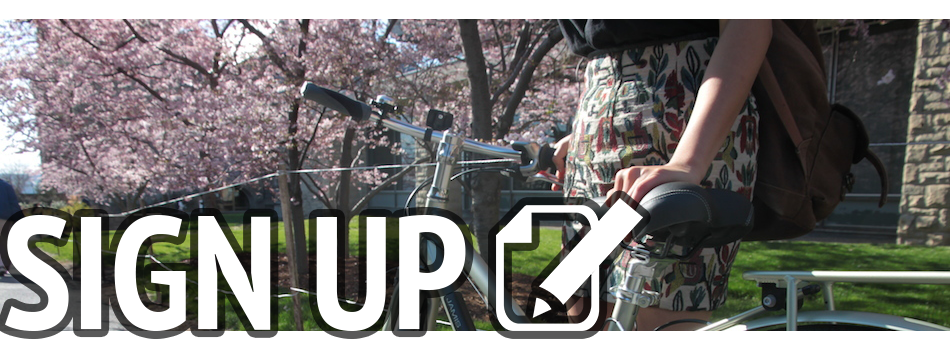
<style>
.page{position:relative;width:950px;height:350px}
.page>*{position:absolute;margin:0}
.t1{font:160px "PTSans-NarrowBold";color:#ffffff}
</style>
<div class="page">
<p class="t1" style="left:5px;top:215px;width:461px;height:116px">SIGN UP</p>
</div>
